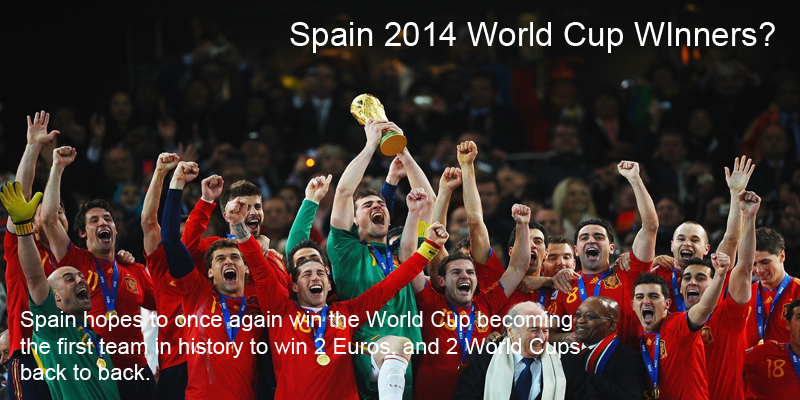
<style>
.page{position:relative;width:800px;height:400px}
.page>*{position:absolute;margin:0}
.t1{font:33.3px "ArialMT";color:#ffffff}
.t2{font:22.2px "ArialMT";color:#ffffff}
</style>
<div class="page">
<p class="t1" style="left:290px;top:22px;width:485px;height:31px">Spain 2014 World Cup WInners?</p>
<p class="t2" style="left:20px;top:311px;width:560px;height:69px">Spain hopes to once again win the World Cup becoming <br>the first team in history to win 2 Euros, and 2 World Cups<br>back to back.</p>
</div>
